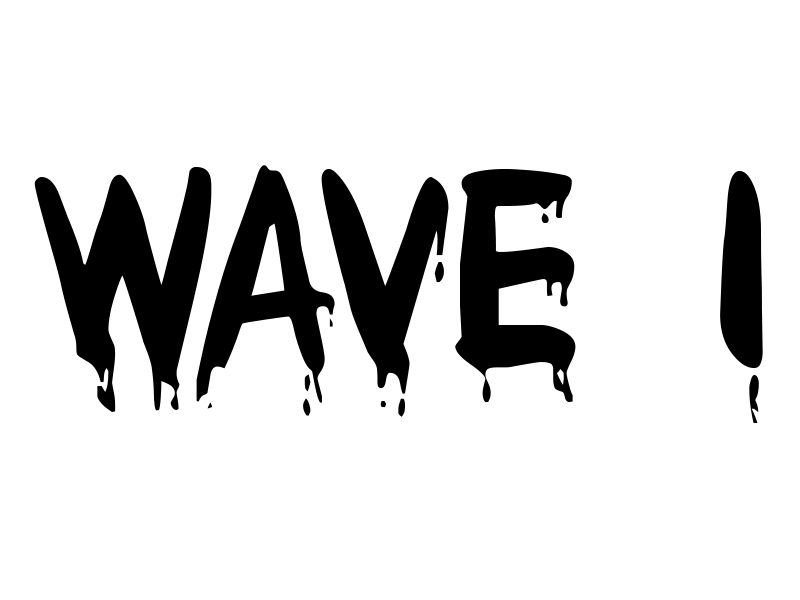
<style>
.page{position:relative;width:800px;height:600px;background:#ffffff}
.page>*{position:absolute;margin:0}
.t1{font:256px "Bloody";color:#000000}
</style>
<div class="page">
<p class="t1" style="left:34px;top:165px;width:729px;height:258px">Wave 1</p>
</div>
